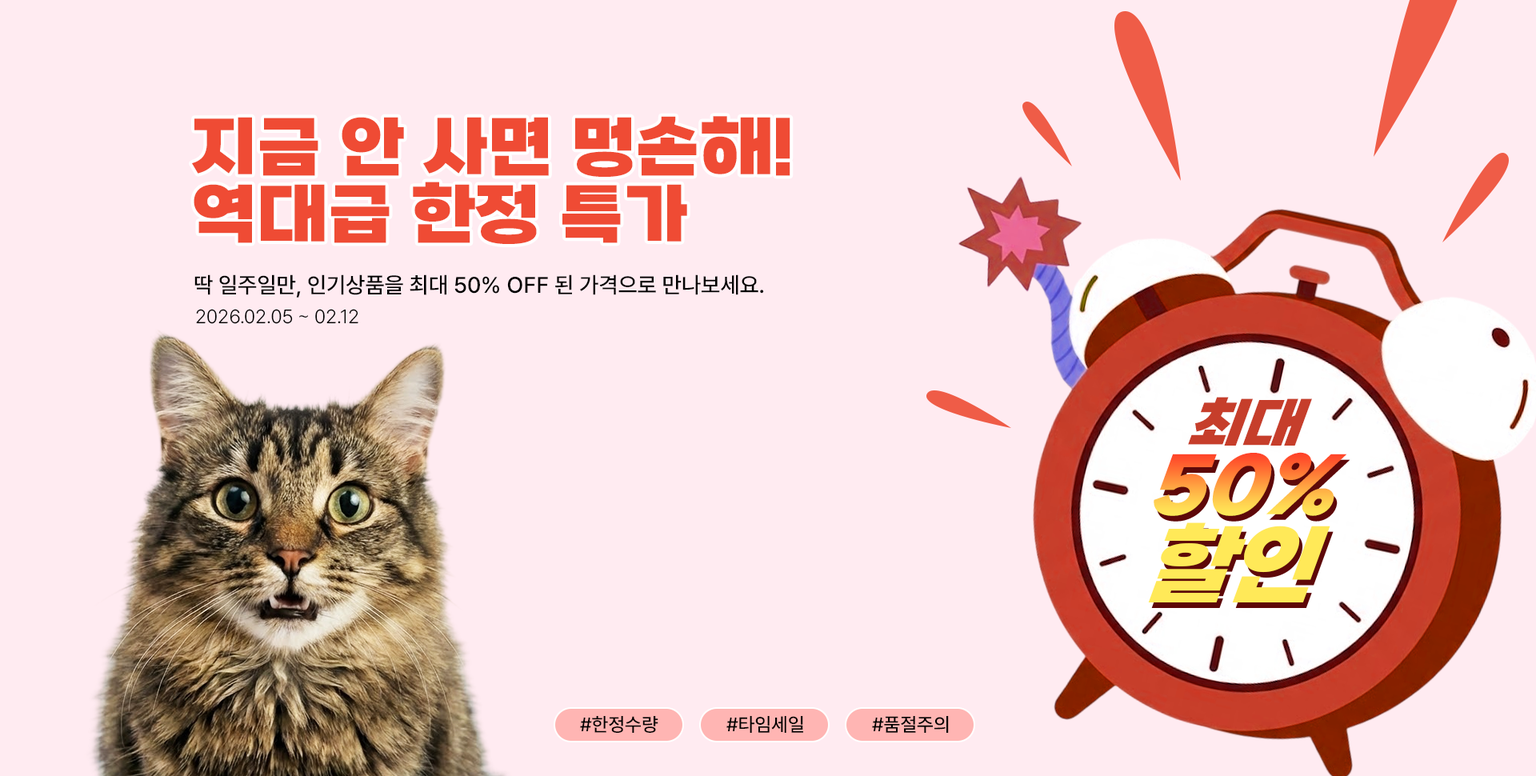
<style>
.page{position:relative;width:1536px;height:776px;background:#ffebf1}
.page>*{position:absolute;margin:0}
.t1{font:67.2px/67.2px "SBAggroB";color:#ef4b34;text-transform:uppercase}
.t2{font:22.4px "Pretendard-Medium";color:#000000;text-transform:uppercase}
.t3{font:19.2px "Pretendard-Light";color:#000000;text-transform:uppercase}
.t4{font:58.9px "SBAggroB";color:#c63e2b;text-transform:uppercase;scale:0.94 1}
.t5{font:80.3px "SBAggroB";text-transform:uppercase;scale:0.94 1}
.t6{font:93.7px "SBAggroB";color:#ffe958;text-transform:uppercase;scale:0.94 1}
.t7{font:19.2px "Pretendard-Medium";color:#000000;text-transform:uppercase}
</style>
<div class="page">
<p class="t1" style="left:192px;top:116px;width:599px;height:128px">지금 안 사면 멍손해! <br>역대급 한정 특가</p>
<p class="t2" style="left:194px;top:274px;width:570px;height:24px">딱 일주일만, 인기상품을 최대 50% OFF 된 가격으로 만나보세요.</p>
<p class="t3" style="left:196px;top:309px;width:162px;height:15px">2026.02.05 ~ 02.12</p>
<p class="t4" style="left:1188px;top:397px;width:124px;height:49px">최대</p>
<p class="t5" style="left:1154px;top:452px;width:193px;height:64px">50%</p>
<p class="t6" style="left:1148px;top:523px;width:183px;height:80px">할인</p>
<p class="t7" style="left:580px;top:716px;width:79px;height:17px">#한정수량</p>
<p class="t7" style="left:727px;top:716px;width:76px;height:17px">#타임세일</p>
<p class="t7" style="left:872px;top:716px;width:77px;height:17px">#품절주의</p>
</div>
